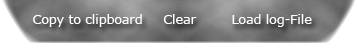
<style>
.page{position:relative;width:357px;height:48px}
.page>*{position:absolute;margin:0}
.t1{font:12.5px "Verdana";color:#ffffff}
</style>
<div class="page">
<p class="t1" style="left:33px;top:14px;width:109px;height:13px">Copy to clipboard</p>
<p class="t1" style="left:163px;top:14px;width:34px;height:10px">Clear</p>
<p class="t1" style="left:232px;top:14px;width:80px;height:13px">Load log-File</p>
</div>
